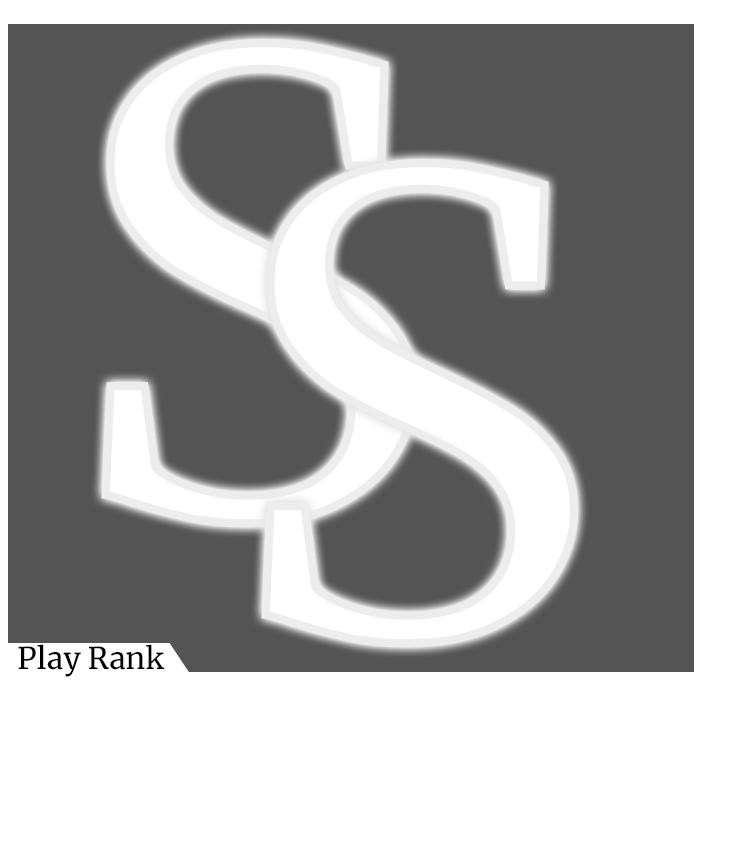
<style>
.page{position:relative;width:746px;height:844px;background:#545454}
.page>*{position:absolute;margin:0}
.t1{font:640px "Merriweather-Regular";color:#ffffff}
.t2{font:29.7px "Merriweather-Regular";color:#000000}
</style>
<div class="page">
<p class="t1" style="left:101px;top:39px;width:317px;height:489px">S</p>
<p class="t1" style="left:261px;top:159px;width:317px;height:489px">S</p>
<p class="t2" style="left:18px;top:644px;width:147px;height:33px">Play Rank</p>
</div>
